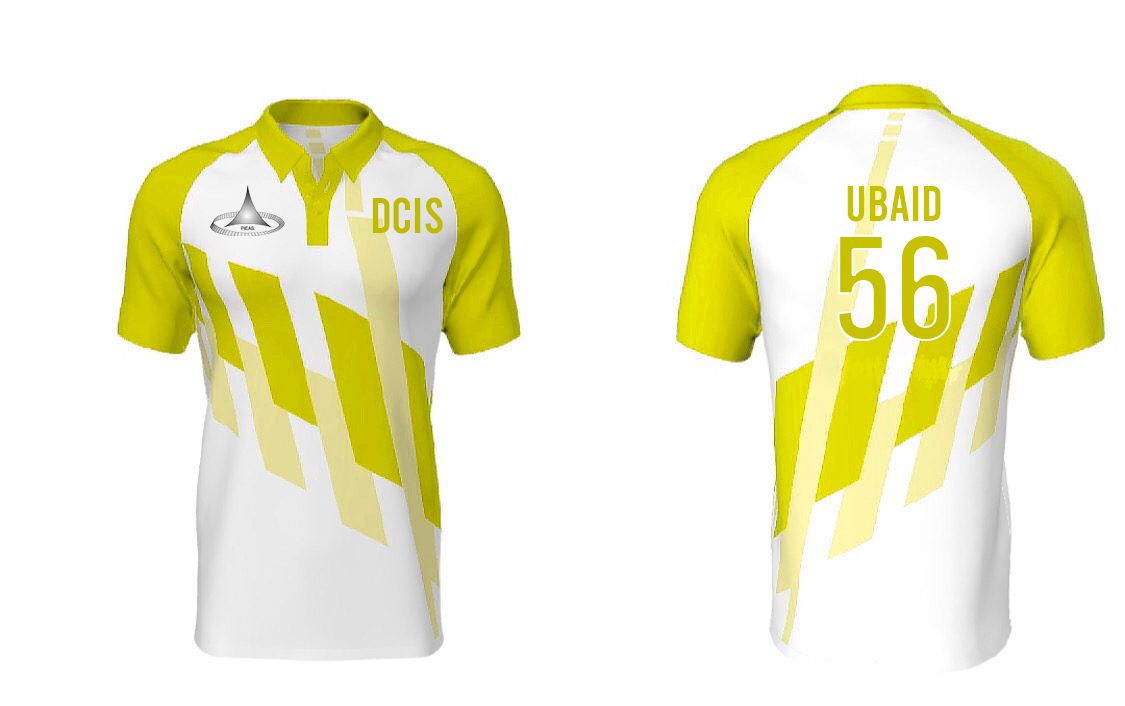
<style>
.page{position:relative;width:1125px;height:706px;background:#ffffff}
.page>*{position:absolute;margin:0}
.t1{font:50px "Bebas-Regular";color:#c1bb00}
.t2{font:50px "Bebas-Regular";color:#c8c100}
.t3{font:149.9px "Bebas-Regular";color:#c8c100}
</style>
<div class="page">
<p class="t1" style="left:372px;top:197px;width:71px;height:37px">DCIS</p>
<p class="t2" style="left:847px;top:186px;width:94px;height:36px">UBAID</p>
<p class="t3" style="left:837px;top:234px;width:114px;height:107px">56</p>
</div>
